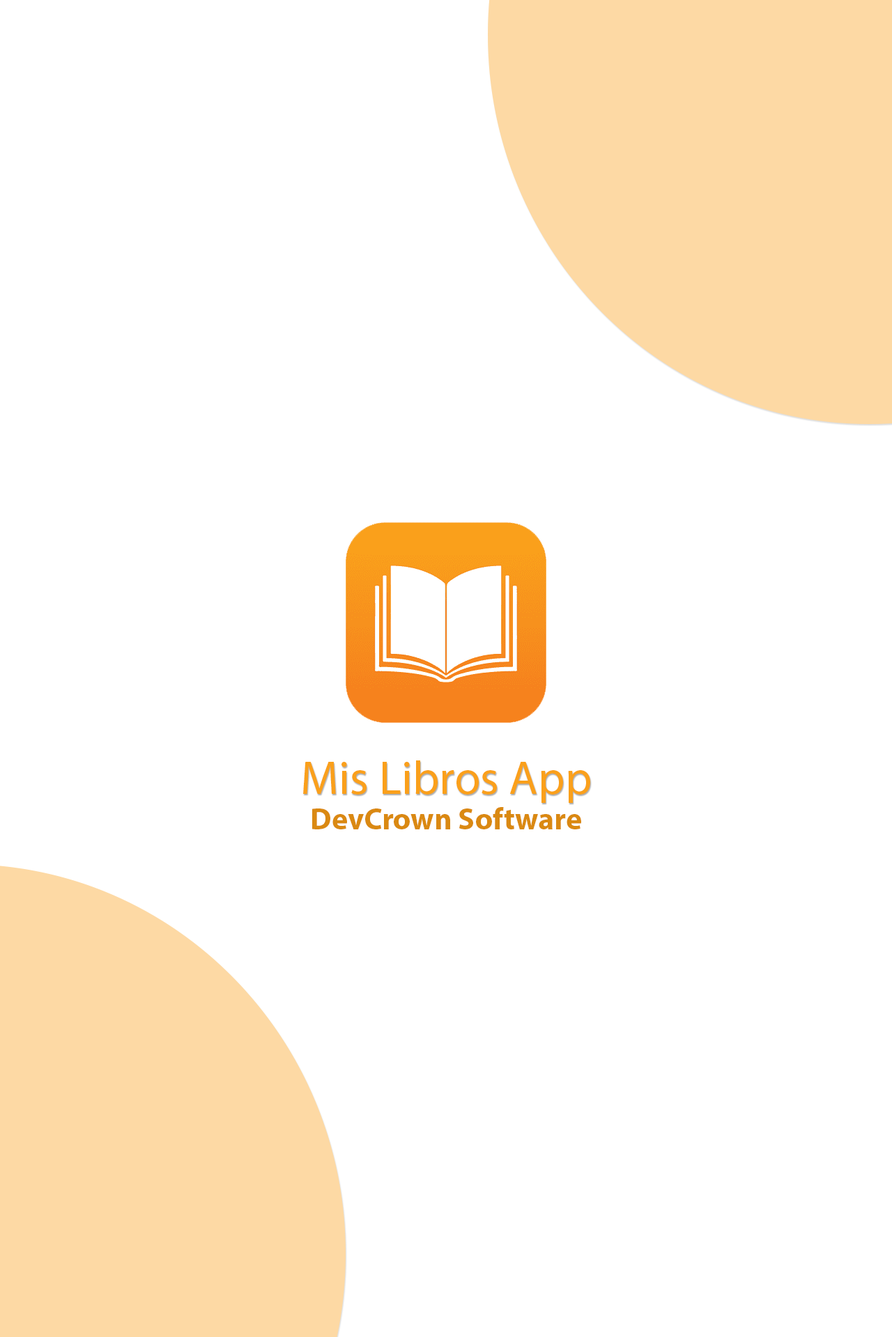
<style>
.page{position:relative;width:892px;height:1337px;background:#ffffff}
.page>*{position:absolute;margin:0}
.t1{font:47.4px "MyriadPro-Regular";color:#faa01b}
.t2{font:30.6px "MyriadPro-Bold";color:#da8912}
</style>
<div class="page">
<p class="t1" style="left:303px;top:761px;width:287px;height:42px">Mis Libros App</p>
<p class="t2" style="left:312px;top:807px;width:269px;height:23px">DevCrown Software</p>
</div>
